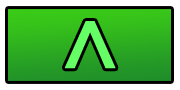
<style>
.page{position:relative;width:180px;height:90px}
.page>*{position:absolute;margin:0}
.t1{font:100px "MyriadPro-Regular";color:#65ff65;font-weight:bold}
</style>
<div class="page">
<p class="t1" style="left:65px;top:21px;width:51px;height:48px">^</p>
</div>
